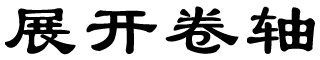
<style>
.page{position:relative;width:320px;height:60px;background:#ffffff}
.page>*{position:absolute;margin:0}
.t1{font:75px "LiSu";letter-spacing:0.075em;color:#000000}
</style>
<div class="page">
<p class="t1" style="left:5px;top:6px;width:310px;height:49px">展开卷轴</p>
</div>
